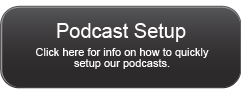
<style>
.page{position:relative;width:241px;height:94px}
.page>*{position:absolute;margin:0}
.t1{font:20px "ArialMT";color:#ffffff}
.t2{font:11px/11px "ArialMT";color:#ffffff}
</style>
<div class="page">
<p class="t1" style="left:57px;top:23px;width:129px;height:19px">Podcast Setup</p>
<p class="t2" style="left:36px;top:48px;width:173px;height:21px;text-align:center">Click here for info on how to quickly<br>setup our podcasts.</p>
</div>
